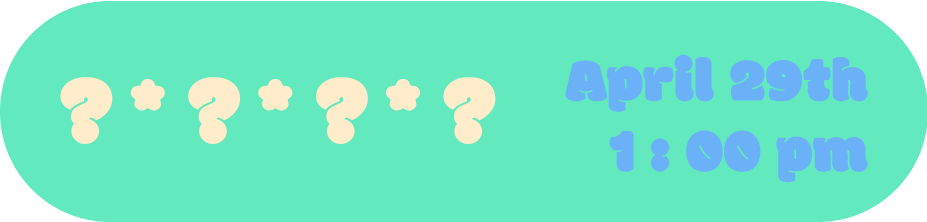
<style>
.page{position:relative;width:927px;height:222px;background:#62e9be}
.page>*{position:absolute;margin:0}
.t1{font:63.1px/70.4px "Modak";letter-spacing:0.005em;color:#6ab1f7}
.t2{font:92.9px "Modak";letter-spacing:0.005em;color:#ffeccb;scale:1.05 1}
</style>
<div class="page">
<p class="t1" style="left:565px;top:54px;width:303px;height:129px;text-align:right">April 29th<br>1 : 00 pm</p>
<p class="t2" style="left:60px;top:77px;width:436px;height:67px">? * ? * ? * ?</p>
</div>
